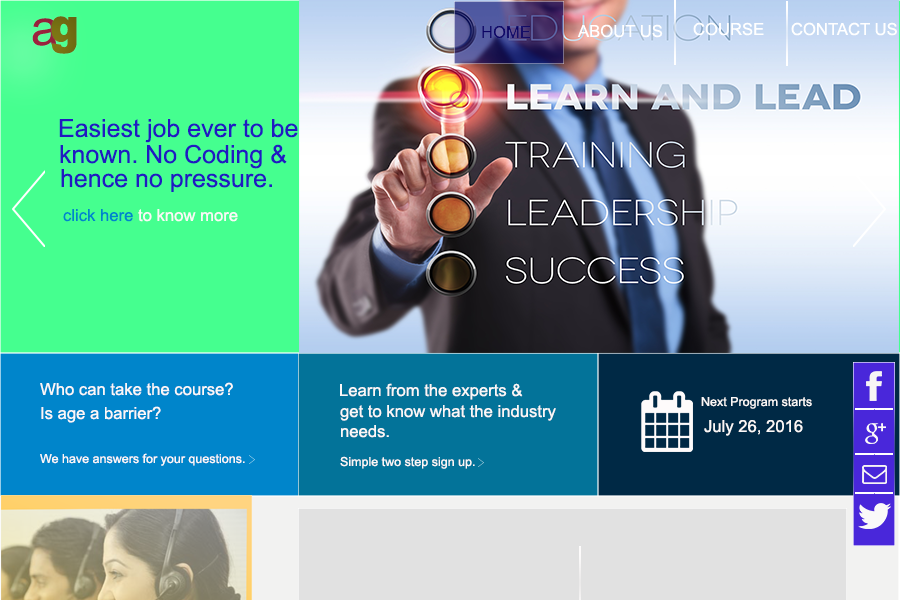
<style>
.page{position:relative;width:900px;height:600px}
.page>*{position:absolute;margin:0}
.t1{font:16.7px "ArialMT";color:#ffffff}
.t2{font:25px "ArialMT";color:#211ac0}
.t3{font:16.7px "ArialMT";color:#faf8f8}
.t4{font:16.7px "ArialMT";color:#0085cb}
.t5{font:12.5px "ArialMT";color:#faf8f8}
</style>
<div class="page">
<p class="t1" style="left:791px;top:22px;width:106px;height:14px">CONTACT US</p>
<p class="t2" style="left:59px;top:119px;width:239px;height:24px">Easiest job ever to be</p>
<p class="t2" style="left:60px;top:144px;width:227px;height:25px">known. No Coding &amp;</p>
<p class="t2" style="left:61px;top:169px;width:211px;height:23px">hence no pressure.</p>
<p class="t3" style="left:63px;top:209px;width:175px;height:13px"><span class="t4">click here </span>to know more</p>
<p class="t3" style="left:40px;top:382px;width:193px;height:14px">Who can take the course?</p>
<p class="t3" style="left:340px;top:383px;width:183px;height:17px">Learn from the experts &amp;</p>
<p class="t5" style="left:701px;top:397px;width:111px;height:12px">Next Program starts</p>
<p class="t3" style="left:41px;top:406px;width:120px;height:17px">Is age a barrier?</p>
<p class="t3" style="left:340px;top:405px;width:216px;height:33px;text-align:right">get to know what the industry<br>needs.</p>
<p class="t3" style="left:704px;top:420px;width:99px;height:16px">July 26, 2016</p>
<p class="t5" style="left:40px;top:453px;width:205px;height:13px">We have answers for your questions.</p>
<p class="t5" style="left:340px;top:456px;width:135px;height:13px">Simple two step sign up.</p>
</div>
